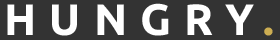
<style>
.page{position:relative;width:280px;height:40px;background:#333333}
.page>*{position:absolute;margin:0}
.t1{font:44px "Ubuntu-Bold";letter-spacing:0.3em;color:#ffffff;text-transform:uppercase}
.t2{font:44px "Ubuntu-Bold";letter-spacing:0.3em;color:#ccad52;text-transform:uppercase}
</style>
<div class="page">
<p class="t1" style="left:7px;top:3px;width:266px;height:33px">Hungry<span class="t2">.</span></p>
</div>
